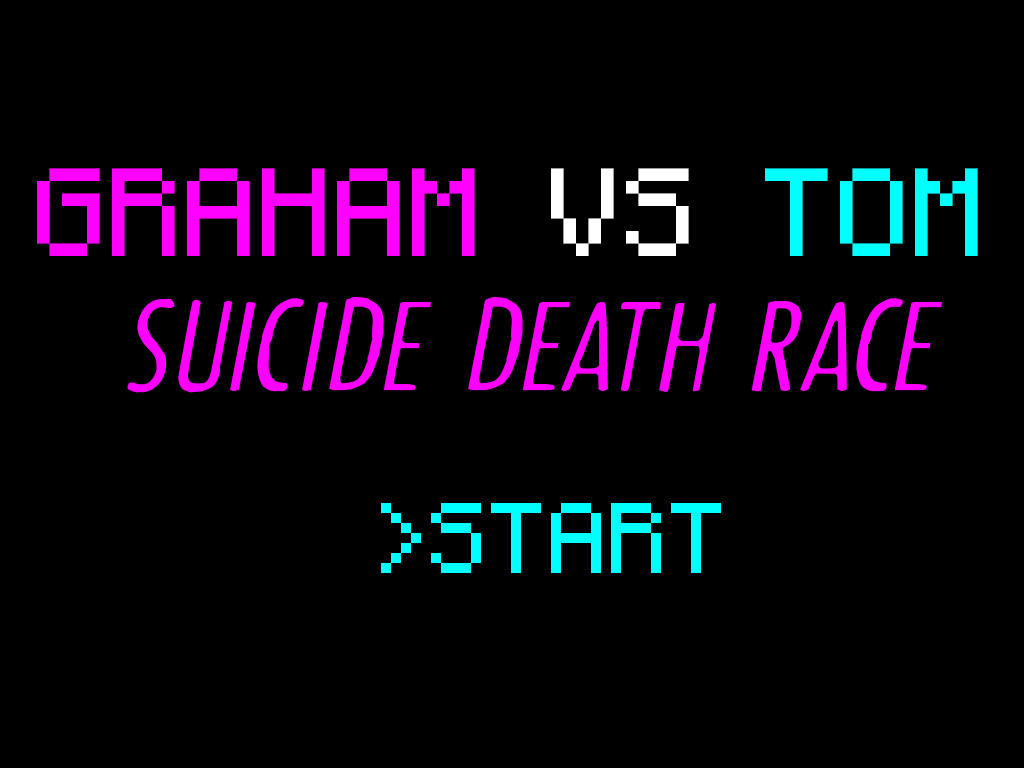
<style>
.page{position:relative;width:1024px;height:768px;background:#000000}
.page>*{position:absolute;margin:0}
.t1{font:100px "Minecraftia"}
.t2{font:100px "Minecraftia";color:#ff00ff}
.t3{font:100px "Minecraftia";color:#ffffff}
.t4{font:100px "Minecraftia";color:#00ffff}
.t5{font:150px "CFOldPhotographCredit-Regular";color:#ff00ff}
.t6{font:80px "Minecraftia"}
.t7{font:80px "Minecraftia";color:#00ffff}
</style>
<div class="page">
<p class="t1" style="left:33px;top:168px;width:941px;height:88px">GRAHAM VS TOM</p>
<p class="t2" style="left:37px;top:168px;width:941px;height:88px">GRAHAM <span class="t3">VS </span><span class="t4">TOM</span></p>
<p class="t5" style="left:127px;top:297px;width:815px;height:96px">SUICIDE DEATH RACE</p>
<p class="t6" style="left:375px;top:502px;width:340px;height:70px">&gt;START</p>
<p class="t7" style="left:381px;top:503px;width:340px;height:70px">&gt;START</p>
</div>
